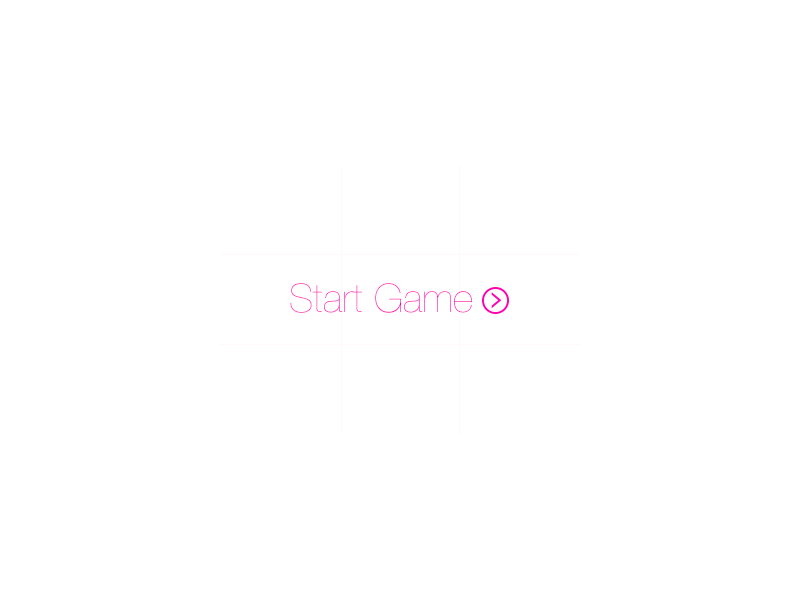
<style>
.page{position:relative;width:800px;height:600px;background:#ffffff}
.page>*{position:absolute;margin:0}
.t1{font:39.6px "HelveticaNeue-UltraLight";color:#ff00ae}
</style>
<div class="page">
<p class="t1" style="left:290px;top:283px;width:182px;height:30px">Start Game</p>
</div>
